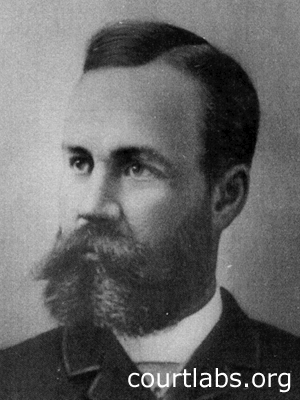
<style>
.page{position:relative;width:300px;height:400px}
.page>*{position:absolute;margin:0}
.t1{font:25px "Verdana";color:#ffffff}
</style>
<div class="page">
<p class="t1" style="left:128px;top:368px;width:163px;height:25px">courtlabs.org</p>
</div>
